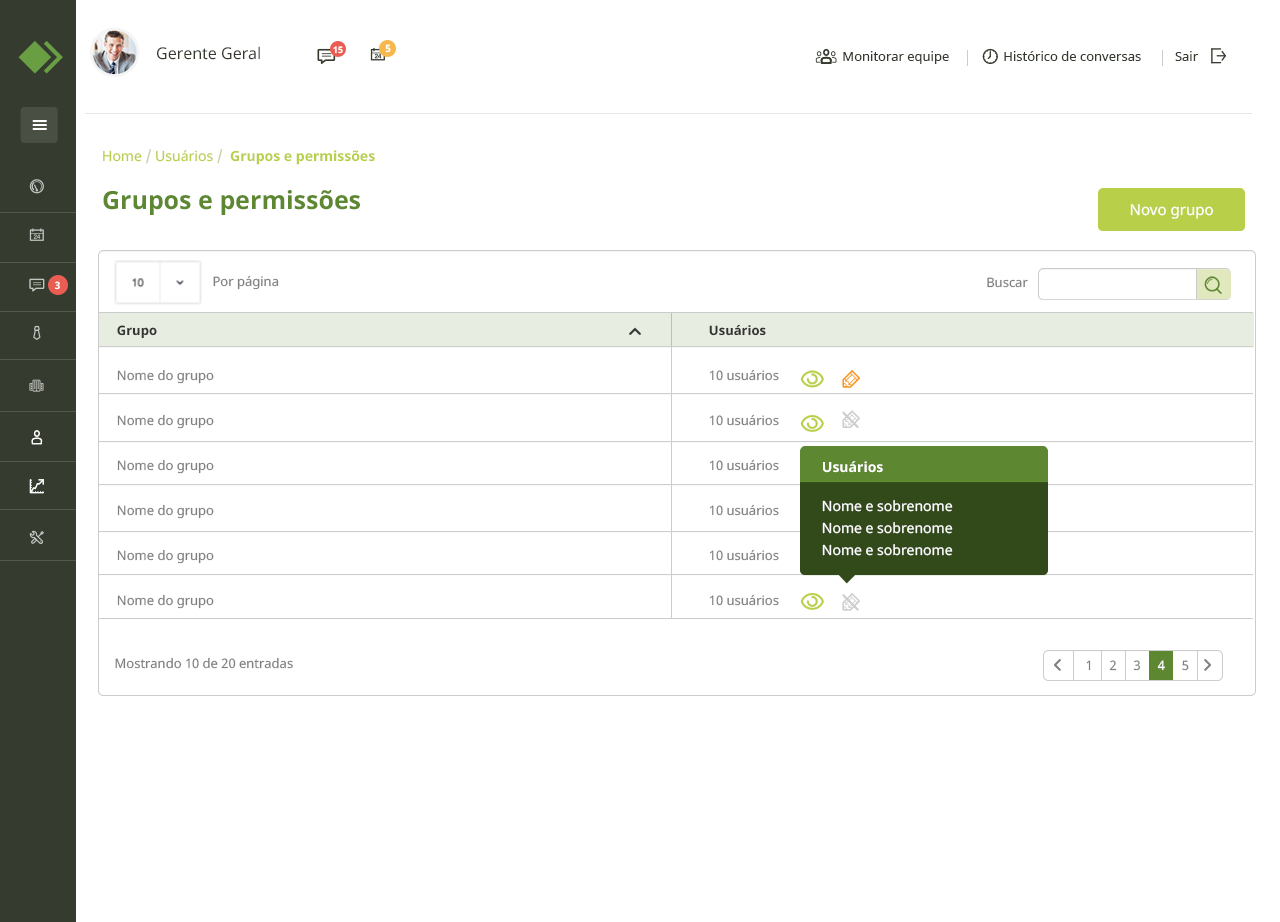
<style>
.page{position:relative;width:1280px;height:922px;background:#ffffff}
.page>*{position:absolute;margin:0}
.t1{font:16px "NotoSans";color:#353b2f}
.t2{font:9px "NotoSans-Bold";color:#ffffff}
.t3{font:10px "NotoSans-Bold";color:#ffffff}
.t4{font:13px "NotoSans";color:#353b2f}
.t5{font:14px "NotoSans-Bold";color:#b8cf49}
.t6{font:14px "NotoSans";color:#b8cf49}
.t7{font:14px "NotoSans";color:#c7cfa1}
.t8{font:25px "NotoSans-Bold";color:#5d8730}
.t9{font:15px "NotoSans";color:#ffffff}
.t10{font:13px "NotoSans";color:#808080}
.t11{font:13px/45px "NotoSans";color:#808080}
.t12{font:13px/45px "NotoSans-Bold";color:#333333}
.t13{font:14px/22px "NotoSans";color:#ffffff}
.t14{font:14px "NotoSans-Bold";color:#ffffff}
</style>
<div class="page">
<p class="t1" style="left:157px;top:46px;width:103px;height:14px">Gerente Geral</p>
<p class="t2" style="left:333px;top:46px;width:10px;height:8px">15</p>
<p class="t3" style="left:385px;top:44px;width:6px;height:9px">5</p>
<p class="t4" style="left:843px;top:51px;width:355px;height:13px">Monitorar equipe                Histórico de conversas          Sair</p>
<p class="t5" style="left:103px;top:149px;width:272px;height:16px"><span class="t6">Home </span><span class="t7">/</span><span class="t6"> Usuários </span><span class="t7">/  </span>Grupos e permissões</p>
<p class="t8" style="left:103px;top:190px;width:257px;height:25px">Grupos e permissões</p>
<p class="t9" style="left:1130px;top:204px;width:83px;height:15px">Novo grupo</p>
<p class="t3" style="left:55px;top:281px;width:5px;height:9px">3</p>
<p class="t10" style="left:213px;top:275px;width:66px;height:15px">Por página</p>
<p class="t10" style="left:987px;top:277px;width:41px;height:11px">Buscar</p>
<p class="t11" style="left:117px;top:325px;width:97px;height:284px"><span class="t12">Grupo<br></span>Nome do grupo<br>Nome do grupo<br>Nome do grupo<br>Nome do grupo<br>Nome do grupo<br>Nome do grupo</p>
<p class="t11" style="left:709px;top:324px;width:70px;height:282px"><span class="t12">Usuários<br></span>10 usuários<br>10 usuários<br>10 usuários<br>10 usuários<br>10 usuários<br>10 usuários</p>
<p class="t13" style="left:822px;top:461px;width:131px;height:95px"><span class="t14">Usuários<br><br></span>Nome e sobrenome<br>Nome e sobrenome<br>Nome e sobrenome</p>
<p class="t10" style="left:115px;top:657px;width:178px;height:12px">Mostrando 10 de 20 entradas</p>
</div>
